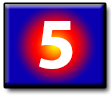
<style>
.page{position:relative;width:111px;height:96px}
.page>*{position:absolute;margin:0}
.t1{font:72px "MyriadPro-Bold";color:#ffffff}
</style>
<div class="page">
<p class="t1" style="left:39px;top:21px;width:34px;height:48px">5</p>
</div>
